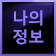
<style>
.page{position:relative;width:56px;height:56px}
.page>*{position:absolute;margin:0}
.t1{font:16px "MalgunGothicBold";color:#997afb}
</style>
<div class="page">
<p class="t1" style="left:13px;top:10px;width:31px;height:35px">나의<br>정보</p>
</div>
